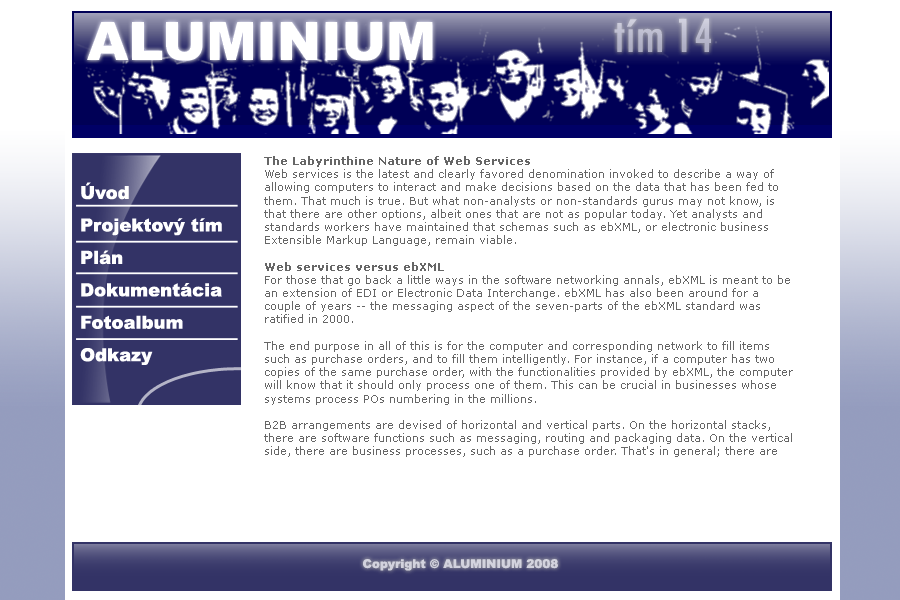
<style>
.page{position:relative;width:900px;height:600px;background:#ffffff}
.page>*{position:absolute;margin:0}
.t1{font:53px "Arial-Black";color:#ffffff}
.t2{font:53px "TwCenMT-Condensed";color:#b8b8cc}
.t3{font:11px "Verdana";color:#666666}
.t4{font:11px "Verdana-Bold";color:#666666}
.t5{font:18px/32.4px "Arial-Black";color:#ffffff}
.t6{font:12px "Arial-Black";color:#d2d2dd}
</style>
<div class="page">
<p class="t1" style="left:87px;top:22px;width:346px;height:39px">ALUMINIUM</p>
<p class="t2" style="left:614px;top:18px;width:97px;height:34px">tím 14</p>
<p class="t3" style="left:264px;top:156px;width:529px;height:301px"><span class="t4">The Labyrinthine Nature of Web Services</span> <br>Web services is the latest and clearly favored denomination invoked to describe a way of allowing computers to interact and make decisions based on the data that has been fed to them. That much is true. But what non-analysts or non-standards gurus may not know, is that there are other options, albeit ones that are not as popular today. Yet analysts and standards workers have maintained that schemas such as ebXML, or electronic business Extensible Markup Language, remain viable. <br><br><span class="t4">Web services versus ebXML<br></span>For those that go back a little ways in the software networking annals, ebXML is meant to be an extension of EDI or Electronic Data Interchange. ebXML has also been around for a couple of years -- the messaging aspect of the seven-parts of the ebXML standard was ratified in 2000.<br> <br>The end purpose in all of this is for the computer and corresponding network to fill items such as purchase orders, and to fill them intelligently. For instance, if a computer has two copies of the same purchase order, with the functionalities provided by ebXML, the computer will know that it should only process one of them. This can be crucial in businesses whose systems process POs numbering in the millions. <br><br>B2B arrangements are devised of horizontal and vertical parts. On the horizontal stacks, there are software functions such as messaging, routing and packaging data. On the vertical side, there are business processes, such as a purchase order. That's in general; there are cases where a PO can be part of the horizontal stack.</p>
<p class="t5" style="left:80px;top:182px;width:142px;height:183px">Úvod<br>Projektový tím<br>Plán<br>Dokumentácia<br>Fotoalbum<br>Odkazy</p>
<p class="t6" style="left:363px;top:559px;width:195px;height:12px">Copyright © ALUMINIUM 2008</p>
</div>
